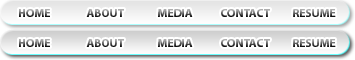
<style>
.page{position:relative;width:355px;height:60px}
.page>*{position:absolute;margin:0}
.t1{font:11.7px "MyriadPro-Bold"}
</style>
<div class="page">
<p class="t1" style="left:19px;top:9px;width:31px;height:8px">HOME</p>
<p class="t1" style="left:86px;top:9px;width:38px;height:8px">ABOUT</p>
<p class="t1" style="left:158px;top:9px;width:35px;height:8px">MEDIA</p>
<p class="t1" style="left:221px;top:9px;width:49px;height:8px">CONTACT</p>
<p class="t1" style="left:293px;top:9px;width:43px;height:8px">RESUME</p>
<p class="t1" style="left:19px;top:39px;width:31px;height:8px">HOME</p>
<p class="t1" style="left:86px;top:39px;width:38px;height:8px">ABOUT</p>
<p class="t1" style="left:158px;top:39px;width:35px;height:8px">MEDIA</p>
<p class="t1" style="left:221px;top:39px;width:49px;height:8px">CONTACT</p>
<p class="t1" style="left:293px;top:39px;width:43px;height:8px">RESUME</p>
</div>
